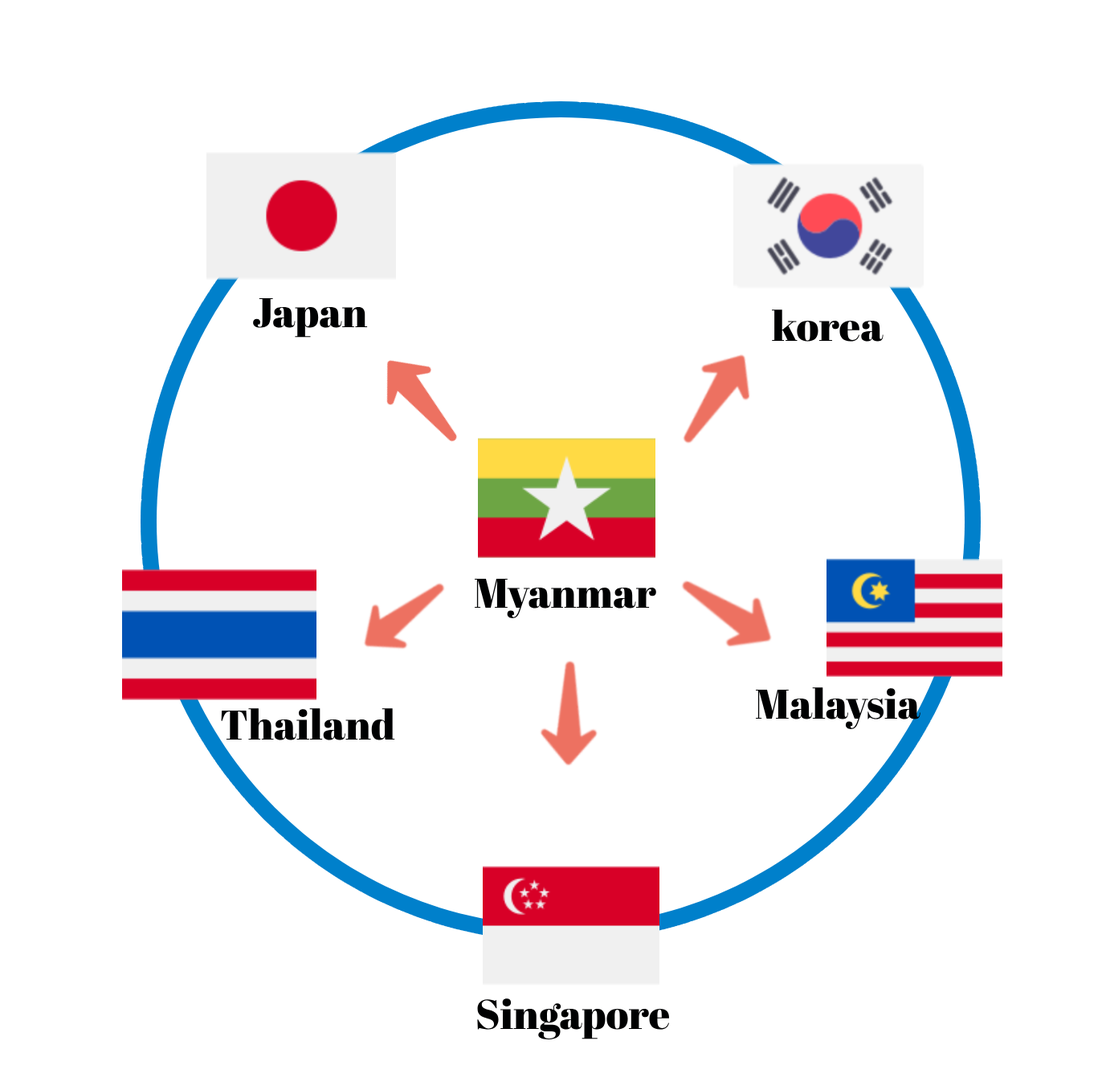
<style>
.page{position:relative;width:1102px;height:1082px;background:#ffffff}
.page>*{position:absolute;margin:0}
.t1{font:41.4px "AbrilFatface-Regular";color:#000102}
</style>
<div class="page">
<p class="t1" style="left:253px;top:297px;width:115px;height:40px">Japan</p>
<p class="t1" style="left:772px;top:309px;width:112px;height:33px">korea</p>
<p class="t1" style="left:475px;top:579px;width:182px;height:39px">Myanmar</p>
<p class="t1" style="left:756px;top:687px;width:165px;height:42px">Malaysia</p>
<p class="t1" style="left:221px;top:708px;width:174px;height:32px">Thailand</p>
<p class="t1" style="left:477px;top:998px;width:193px;height:41px">Singapore</p>
</div>
